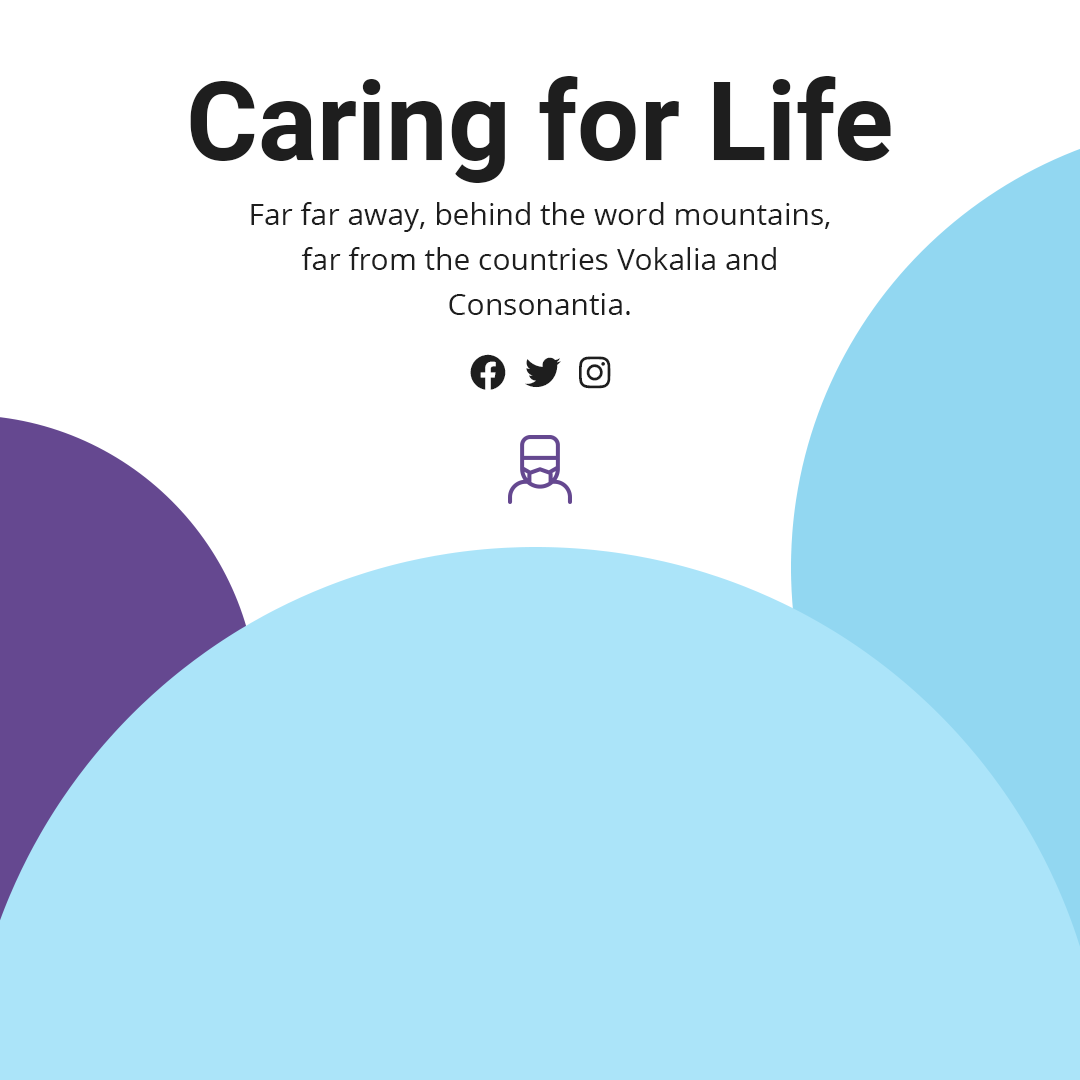
<style>
.page{position:relative;width:1080px;height:1080px;background:#ffffff}
.page>*{position:absolute;margin:0}
.t1{font:110px "Roboto-Bold";color:#1e1e1e}
.t2{font:30px/45px "OpenSans-Regular";color:#1e1e1e}
</style>
<div class="page">
<p class="t1" style="left:190px;top:76px;width:701px;height:107px">Caring for Life</p>
<p class="t2" style="left:251px;top:202px;width:579px;height:113px;text-align:center">Far far away, behind the word mountains, far from the countries Vokalia and Consonantia.</p>
</div>
